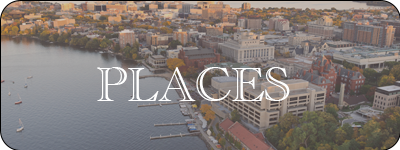
<style>
.page{position:relative;width:400px;height:150px}
.page>*{position:absolute;margin:0}
.t1{font:50px "AcademyEngravedLetPlain";color:#ffffff}
</style>
<div class="page">
<p class="t1" style="left:97px;top:67px;width:193px;height:34px">PLACES</p>
</div>
